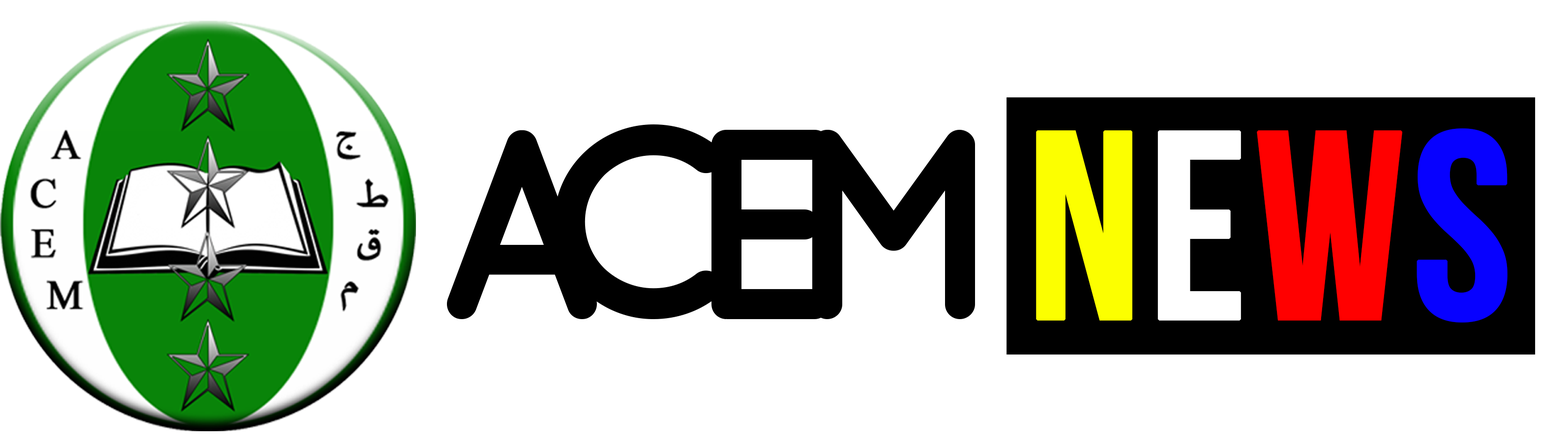
<style>
.page{position:relative;width:1568px;height:444px;background:#ffffff}
.page>*{position:absolute;margin:0}
.t1{font:270.4px "QuicksandBold-Regular";letter-spacing:-0.22em;color:#000000;text-transform:uppercase}
.t2{font:267.5px "BebasNeue";color:#fcff00;font-weight:bold}
.t3{font:267.5px "BebasNeue";color:#ffffff;font-weight:bold}
.t4{font:267.5px "BebasNeue";color:#ff0000;font-weight:bold}
.t5{font:267.5px "BebasNeue";color:#0701ff;font-weight:bold}
</style>
<div class="page">
<p class="t1" style="left:447px;top:124px;width:1061px;height:199px">Acem  <span class="t2">N</span><span class="t3">E</span><span class="t4">W</span><span class="t5">S</span></p>
</div>
